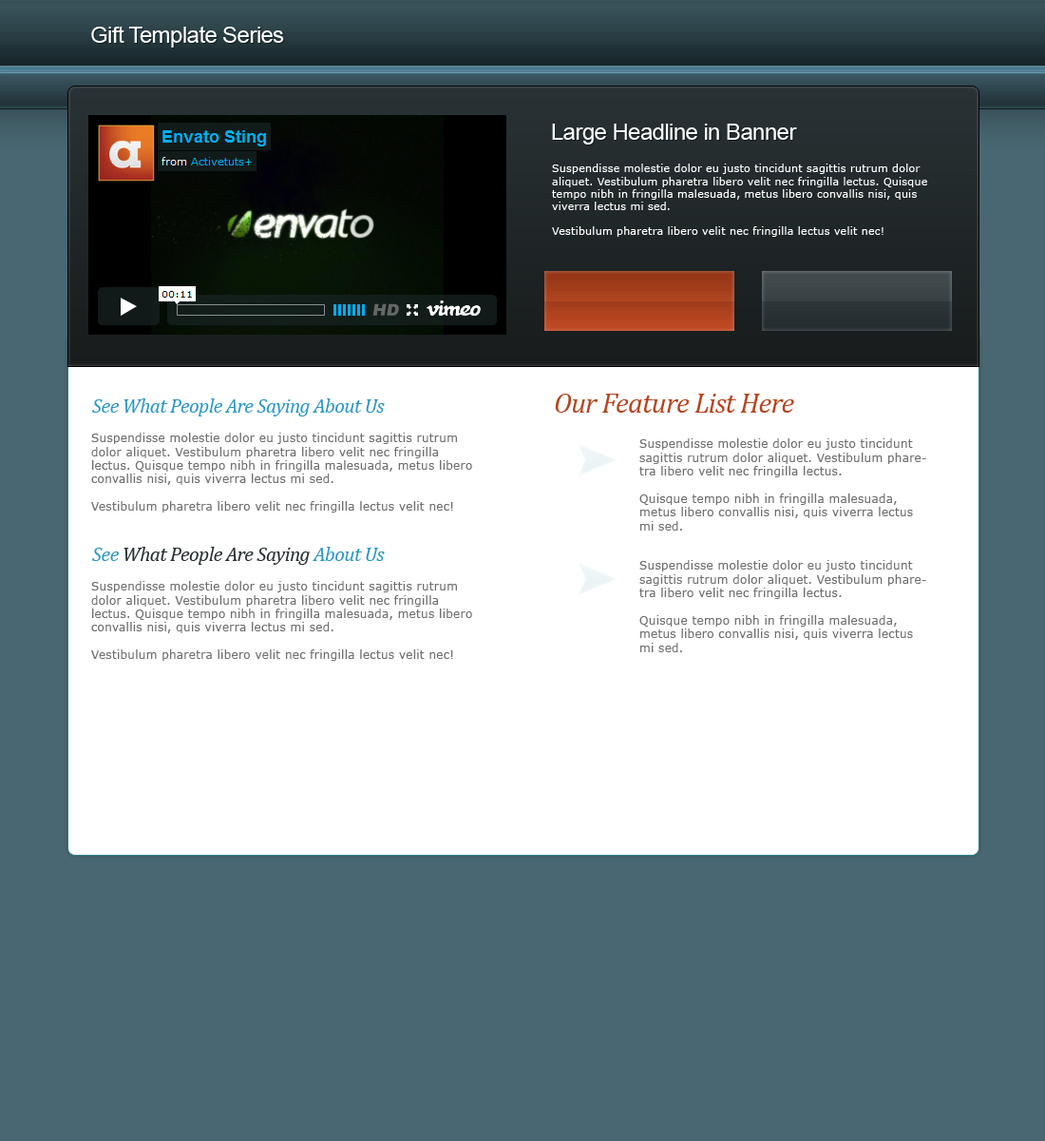
<style>
.page{position:relative;width:1045px;height:1141px;background:#496772}
.page>*{position:absolute;margin:0}
.t1{font:22.8px "ArialMT";letter-spacing:-0.025em;color:#ffffff}
.t2{font:10.5px "Verdana";letter-spacing:0.025em;color:#ffffff}
.t3{font:20px "Cambria-Italic";letter-spacing:-0.025em;color:#2d97c4}
.t4{font:28.5px "Cambria-Italic";letter-spacing:-0.025em;color:#b54520}
.t5{font:11.4px "Verdana";letter-spacing:0.025em;color:#707070}
.t6{font:20px "Cambria-Italic";letter-spacing:-0.025em;color:#283033}
</style>
<div class="page">
<p class="t1" style="left:91px;top:26px;width:193px;height:22px">Gift Template Series</p>
<p class="t1" style="left:552px;top:124px;width:245px;height:20px">Large Headline in Banner</p>
<p class="t2" style="left:552px;top:163px;width:376px;height:74px">Suspendisse molestie dolor eu justo tincidunt sagittis rutrum dolor aliquet. Vestibulum pharetra libero velit nec fringilla lectus. Quisque tempo nibh in fringilla malesuada, metus libero convallis nisi, quis viverra lectus mi sed.<br><br>Vestibulum pharetra libero velit nec fringilla lectus velit nec!</p>
<p class="t3" style="left:92px;top:398px;width:293px;height:18px">See What People Are Saying About Us</p>
<p class="t4" style="left:555px;top:393px;width:240px;height:19px">Our Feature List Here</p>
<p class="t5" style="left:91px;top:432px;width:381px;height:80px">Suspendisse molestie dolor eu justo tincidunt sagittis rutrum dolor aliquet. Vestibulum pharetra libero velit nec fringilla lectus. Quisque tempo nibh in fringilla malesuada, metus libero convallis nisi, quis viverra lectus mi sed.<br><br>Vestibulum pharetra libero velit nec fringilla lectus velit nec!</p>
<p class="t5" style="left:640px;top:438px;width:287px;height:92px">Suspendisse molestie dolor eu justo tincidunt sagittis rutrum dolor aliquet. Vestibulum pharetra libero velit nec fringilla lectus. <br><br>Quisque tempo nibh in fringilla malesuada, metus libero convallis nisi, quis viverra lectus mi sed.</p>
<p class="t6" style="left:92px;top:547px;width:293px;height:18px"><span class="t3">See </span>What People Are Saying <span class="t3">About Us</span></p>
<p class="t5" style="left:640px;top:560px;width:287px;height:92px">Suspendisse molestie dolor eu justo tincidunt sagittis rutrum dolor aliquet. Vestibulum pharetra libero velit nec fringilla lectus. <br><br>Quisque tempo nibh in fringilla malesuada, metus libero convallis nisi, quis viverra lectus mi sed.</p>
<p class="t5" style="left:91px;top:581px;width:381px;height:80px">Suspendisse molestie dolor eu justo tincidunt sagittis rutrum dolor aliquet. Vestibulum pharetra libero velit nec fringilla lectus. Quisque tempo nibh in fringilla malesuada, metus libero convallis nisi, quis viverra lectus mi sed.<br><br>Vestibulum pharetra libero velit nec fringilla lectus velit nec!</p>
</div>
